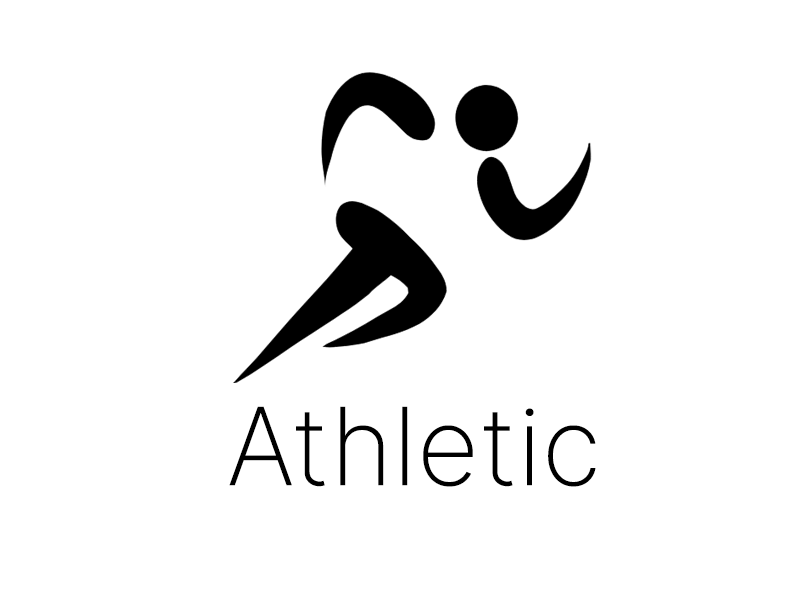
<style>
.page{position:relative;width:800px;height:600px;background:#ffffff}
.page>*{position:absolute;margin:0}
.t1{font:107.9px "Inter-ExtraLightBETA";color:#000000}
</style>
<div class="page">
<p class="t1" style="left:229px;top:406px;width:367px;height:81px">Athletic</p>
</div>
